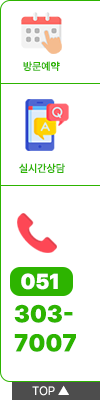
<style>
.page{position:relative;width:100px;height:400px;background:#ffffff}
.page>*{position:absolute;margin:0}
.t1{font:10.7px "Pretendard-Medium";color:#2db400}
.t2{font:21.3px "Pretendard-Black";color:#ffffff}
.t3{font:24.2px/29.1px "Pretendard-Black";color:#2db400}
.t4{font:12px "Pretendard-Light";color:#ffffff}
</style>
<div class="page">
<p class="t1" style="left:23px;top:61px;width:37px;height:10px">방문예약</p>
<p class="t1" style="left:19px;top:163px;width:46px;height:10px">실시간상담</p>
<p class="t2" style="left:21px;top:273px;width:37px;height:17px">051</p>
<p class="t3" style="left:14px;top:304px;width:62px;height:48px">303-<br>7007</p>
<p class="t4" style="left:32px;top:385px;width:37px;height:11px">TOP ▲</p>
</div>
